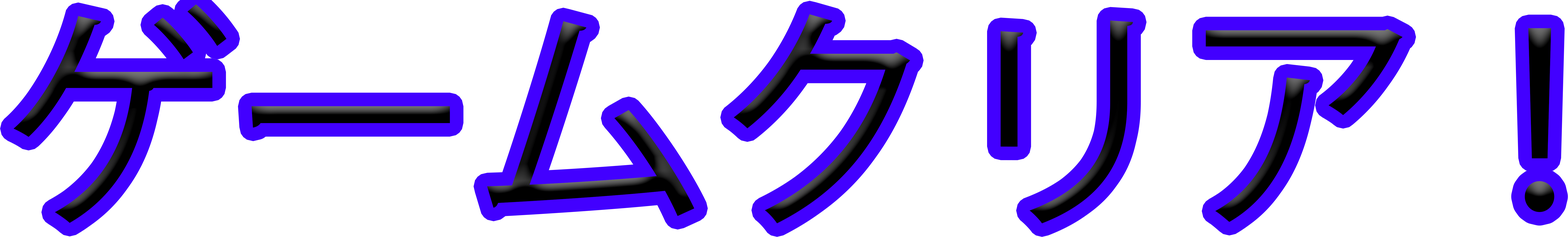
<style>
.page{position:relative;width:1568px;height:237px;background:#ffffff}
.page>*{position:absolute;margin:0}
.t1{font:237.5px "KozGoPr6N-Regular";color:#000000}
</style>
<div class="page">
<p class="t1" style="left:14px;top:4px;width:1540px;height:219px">ゲームクリア！</p>
</div>
